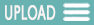
<style>
.page{position:relative;width:94px;height:25px;background:#68b2b1}
.page>*{position:absolute;margin:0}
.t1{font:20.8px "GillSansMT";letter-spacing:0.025em;color:#f9f4f4;font-weight:bold;scale:0.58 1}
.t2{font:20.8px "GillSansMT";letter-spacing:0.05em;color:#f9f4f4;font-weight:bold;scale:0.58 1}
</style>
<div class="page">
<p class="t1" style="left:5px;top:5px;width:51px;height:15px"><span class="t2">UP</span>LOAD</p>
</div>
